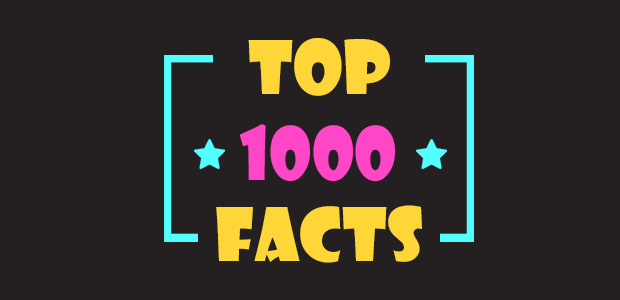
<style>
.page{position:relative;width:620px;height:300px;background:#241f20}
.page>*{position:absolute;margin:0}
.t1{font:72px "ShowcardGothic-Reg";color:#ffd638}
.t2{font:72px "ShowcardGothic-Reg";color:#fe46c7}
</style>
<div class="page">
<p class="t1" style="left:248px;top:38px;width:142px;height:58px">TOP</p>
<p class="t2" style="left:239px;top:124px;width:156px;height:57px">1000</p>
<p class="t1" style="left:216px;top:205px;width:206px;height:58px">FACTS</p>
</div>
